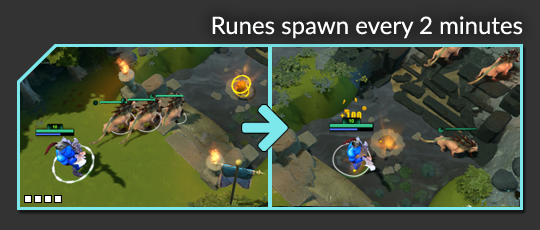
<style>
.page{position:relative;width:540px;height:230px;background:#333333}
.page>*{position:absolute;margin:0}
.t1{font:24px "Lato-Regular";color:#feffff}
</style>
<div class="page">
<p class="t1" style="left:212px;top:16px;width:311px;height:23px">Runes spawn every 2 minutes</p>
</div>
